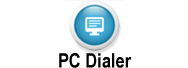
<style>
.page{position:relative;width:188px;height:68px;background:#ffffff}
.page>*{position:absolute;margin:0}
.t1{font:20px "ArialNarrow-Bold";color:#000000}
</style>
<div class="page">
<p class="t1" style="left:59px;top:53px;width:73px;height:15px">PC Dialer</p>
</div>
